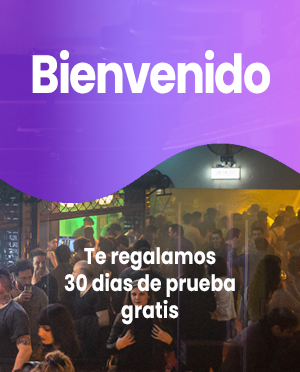
<style>
.page{position:relative;width:300px;height:372px}
.page>*{position:absolute;margin:0}
.t1{font:53.7px "Poppins-Bold";letter-spacing:-0.04em;color:#ffffff;scale:0.83 1}
.t2{font:22.6px "Poppins-Bold";color:#ffffff;scale:0.83 1}
</style>
<div class="page">
<p class="t1" style="left:32px;top:50px;width:238px;height:44px">Bienvenido</p>
<p class="t2" style="left:64px;top:247px;width:171px;height:78px;text-align:center">Te regalamos<br>30 dias de prueba<br>gratis</p>
</div>
